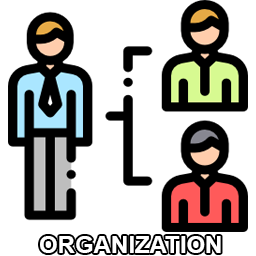
<style>
.page{position:relative;width:256px;height:256px;background:#ffffff}
.page>*{position:absolute;margin:0}
.t1{font:24px "Arial-BoldMT";color:#ffffff}
</style>
<div class="page">
<p class="t1" style="left:40px;top:236px;width:181px;height:17px">ORGANIZATION</p>
</div>
